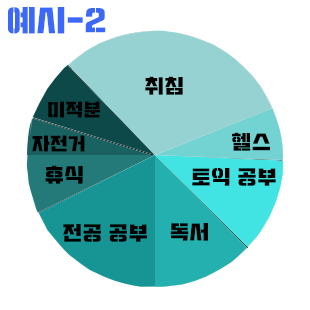
<style>
.page{position:relative;width:310px;height:310px;background:#ffffff}
.page>*{position:absolute;margin:0}
.t1{font:30px "Typo_SsangmunDong_St";color:#3b68f8}
.t2{font:20px "Typo_SsangmunDong_St";color:#000000}
.t3{font:18px "Typo_SsangmunDong_St";color:#000000}
</style>
<div class="page">
<p class="t1" style="left:8px;top:7px;width:98px;height:27px">예시-2</p>
<p class="t2" style="left:145px;top:76px;width:38px;height:19px">취침</p>
<p class="t3" style="left:48px;top:101px;width:52px;height:17px">미적분</p>
<p class="t3" style="left:32px;top:135px;width:53px;height:17px">자전거</p>
<p class="t2" style="left:232px;top:132px;width:38px;height:19px">헬스</p>
<p class="t2" style="left:45px;top:165px;width:38px;height:19px">휴식</p>
<p class="t2" style="left:192px;top:168px;width:84px;height:18px">토익 공부</p>
<p class="t2" style="left:63px;top:224px;width:84px;height:18px">전공 공부</p>
<p class="t2" style="left:170px;top:223px;width:38px;height:18px">독서</p>
</div>
